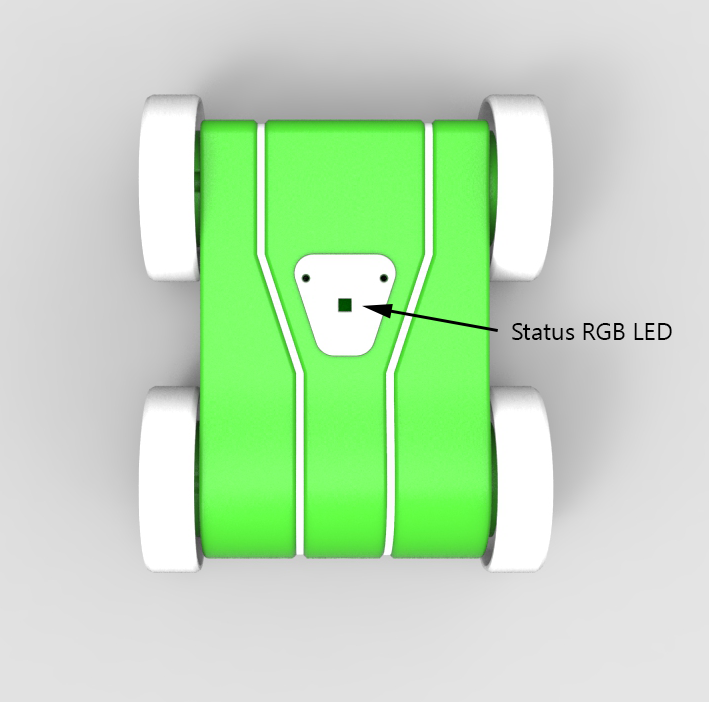
<style>
.page{position:relative;width:709px;height:702px}
.page>*{position:absolute;margin:0}
.t1{font:24px "Leelawadee";color:#000000}
</style>
<div class="page">
<p class="t1" style="left:512px;top:323px;width:160px;height:17px">Status RGB LED</p>
</div>
